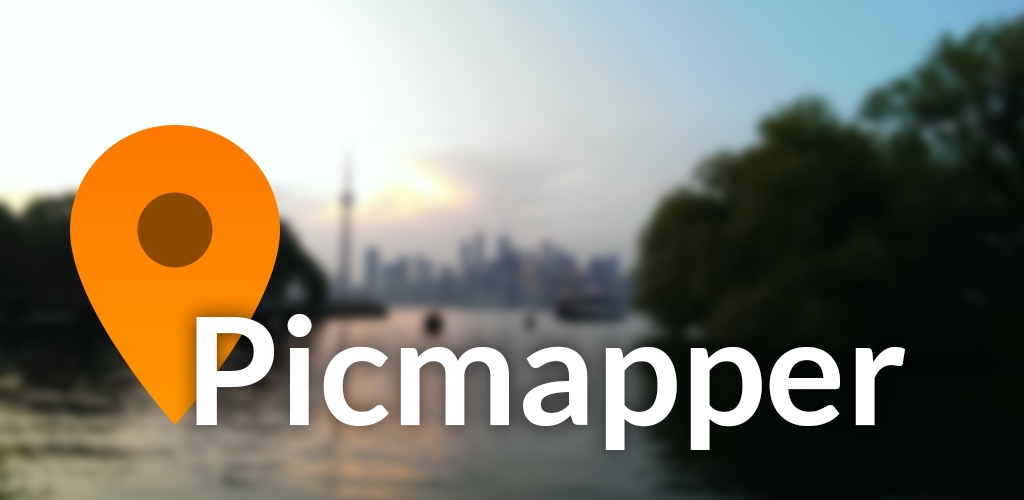
<style>
.page{position:relative;width:1024px;height:500px}
.page>*{position:absolute;margin:0}
.t1{font:150px "Lato-Bold";color:#ffffff}
</style>
<div class="page">
<p class="t1" style="left:196px;top:314px;width:709px;height:136px">Picmapper</p>
</div>
